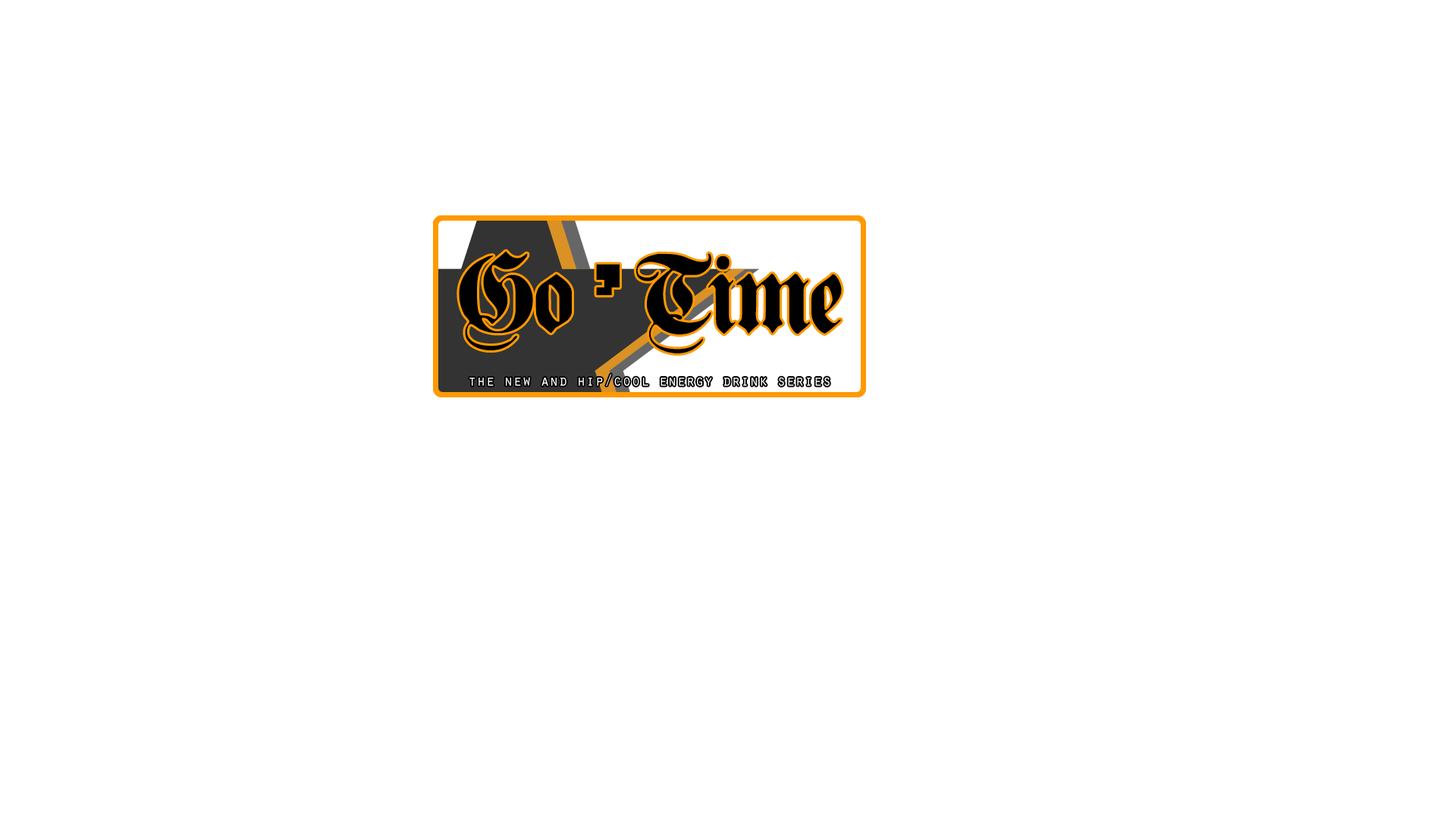
<style>
.page{position:relative;width:1456px;height:819px;background:#ffffff}
.page>*{position:absolute;margin:0}
.t1{font:98.6px "PlainGermanica";color:#000000}
.t2{font:98.6px "Fixedsys";color:#000000}
.t3{font:15.2px "OratorStd";color:#ffffff}
</style>
<div class="page">
<p class="t1" style="left:459px;top:251px;width:383px;height:102px">Go<span class="t2">’</span>Time</p>
<p class="t3" style="left:469px;top:374px;width:361px;height:12px">the new and hip/cool energy drink series</p>
</div>
